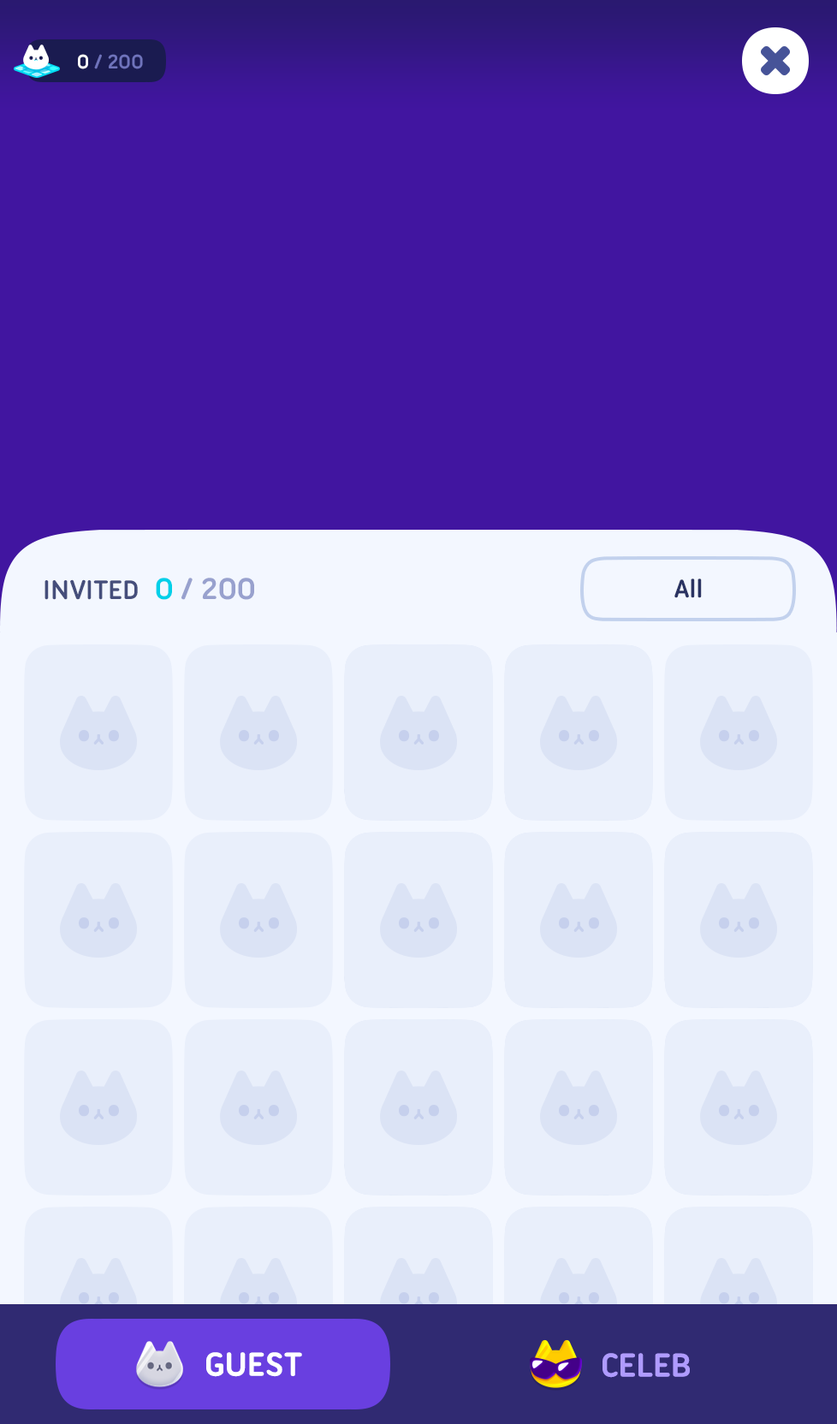
<style>
.page{position:relative;width:837px;height:1424px;background:#e9effb}
.page>*{position:absolute;margin:0}
.t1{font:21.4px "UbuntuTitling-Bold";letter-spacing:-0.025em;color:#6f73bc;text-transform:uppercase}
.t2{font:21.4px "UbuntuTitling-Bold";letter-spacing:-0.025em;color:#ffffff;text-transform:uppercase}
.t3{font:29.1px "UbuntuTitling-Bold";letter-spacing:-0.025em;color:#454e7b;text-transform:uppercase}
.t4{font:32.5px "UbuntuTitling-Bold";letter-spacing:-0.025em;color:#00d0e9;text-transform:uppercase}
.t5{font:32.5px "UbuntuTitling-Bold";letter-spacing:-0.025em;color:#98a1ce;text-transform:uppercase}
.t6{font:27.4px "UbuntuTitling-Bold";letter-spacing:-0.025em;color:#2a3362}
.t7{font:36px "UbuntuTitling-Bold";letter-spacing:-0.025em;color:#ffffff;text-transform:uppercase}
.t8{font:36px "UbuntuTitling-Bold";letter-spacing:-0.025em;color:#af9bff;text-transform:uppercase}
</style>
<div class="page">
<p class="t1" style="left:78px;top:54px;width:65px;height:15px"><span class="t2">0 </span>/ 200</p>
<p class="t3" style="left:45px;top:578px;width:209px;height:22px">Invited  <span class="t4">0 </span><span class="t5">/ 200</span></p>
<p class="t6" style="left:675px;top:579px;width:27px;height:19px">All</p>
<p class="t7" style="left:206px;top:1352px;width:96px;height:25px">Guest</p>
<p class="t8" style="left:603px;top:1353px;width:87px;height:25px">Celeb</p>
</div>
